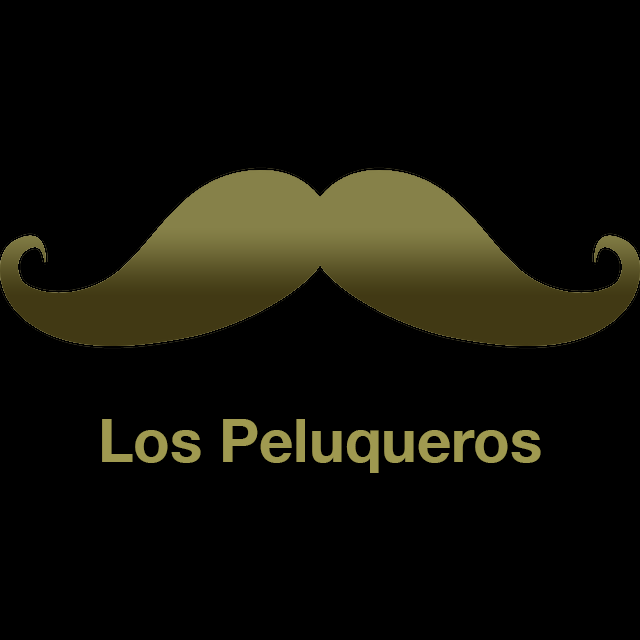
<style>
.page{position:relative;width:640px;height:640px;background:#000000}
.page>*{position:absolute;margin:0}
.t1{font:60px "HelveticaNeue-Bold";color:#9f9950}
</style>
<div class="page">
<p class="t1" style="left:102px;top:419px;width:439px;height:54px">Los Peluqueros</p>
</div>
